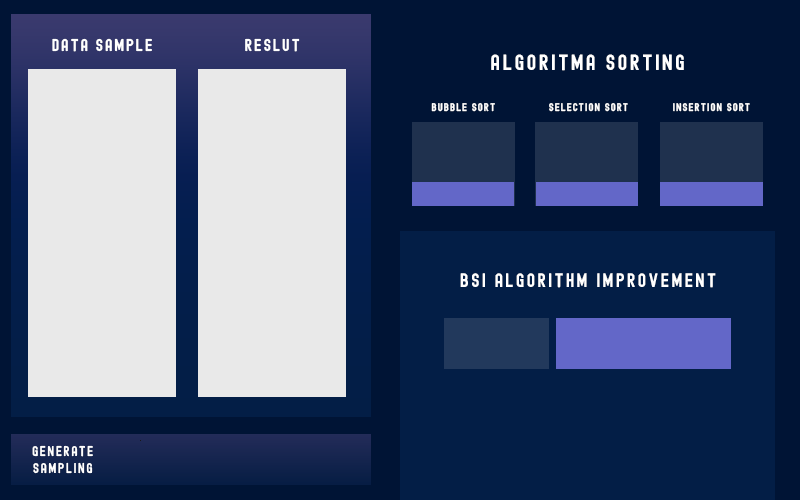
<style>
.page{position:relative;width:800px;height:500px;background:#001435}
.page>*{position:absolute;margin:0}
.t1{font:16.7px "Edmund-Regular";letter-spacing:0.1em;color:#ffffff}
.t2{font:21.6px "Edmund-Regular";letter-spacing:0.1em;color:#ffffff}
.t3{font:10.7px "Edmund-Regular";letter-spacing:0.1em;color:#ffffff}
.t4{font:19.1px "Edmund-Regular";letter-spacing:0.1em;color:#ffffff}
.t5{font:13.7px "Edmund-Regular";letter-spacing:0.1em;color:#ffffff}
</style>
<div class="page">
<p class="t1" style="left:52px;top:38px;width:100px;height:14px">Data Sample</p>
<p class="t1" style="left:245px;top:38px;width:55px;height:14px">RESLUT</p>
<p class="t2" style="left:491px;top:54px;width:193px;height:17px">ALGORITMA SORTING</p>
<p class="t3" style="left:431px;top:103px;width:64px;height:9px">bubble sort</p>
<p class="t3" style="left:549px;top:103px;width:79px;height:9px">SELECTION SORT</p>
<p class="t3" style="left:673px;top:103px;width:77px;height:9px">insertion sort</p>
<p class="t4" style="left:460px;top:273px;width:256px;height:15px">BSI algorithm improvement</p>
<p class="t5" style="left:32px;top:445px;width:61px;height:29px;text-align:center">Generate<br>sampling</p>
</div>
